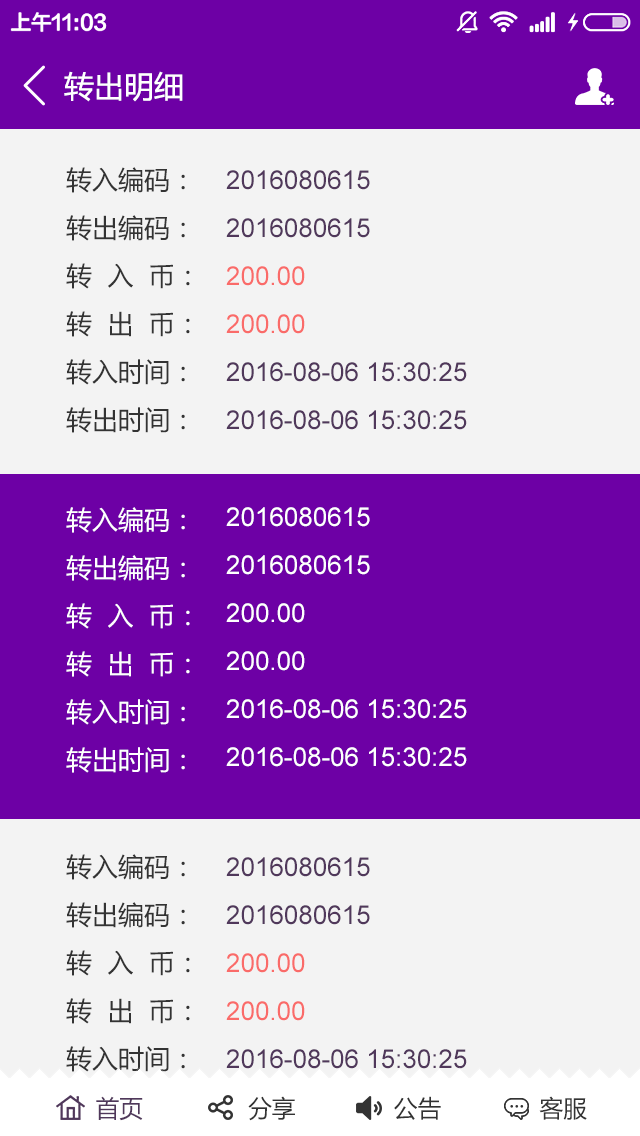
<style>
.page{position:relative;width:640px;height:1136px;background:#f3f3f3}
.page>*{position:absolute;margin:0}
.t1{font:30px "MicrosoftYaHei";color:#ffffff}
.t2{font:26px/48px "MicrosoftYaHei";color:#333333}
.t3{font:26px/48px "ArialMT";color:#50385b}
.t4{font:26px/48px "ArialMT";color:#fa6b69}
.t5{font:26px/48px "MicrosoftYaHei";color:#ffffff}
.t6{font:26px/48px "ArialMT";color:#ffffff}
.t7{font:24px "MicrosoftYaHei";color:#333333}
.t8{font:24px "MicrosoftYaHei";color:#50385b}
</style>
<div class="page">
<p class="t1" style="left:64px;top:71px;width:119px;height:31px">转出明细</p>
<p class="t2" style="left:66px;top:167px;width:124px;height:266px">转入编码：<br>转出编码：<br>转  入  币：<br>转  出  币：<br>转入时间：<br>转出时间：</p>
<p class="t3" style="left:226px;top:170px;width:241px;height:260px">2016080615<br>2016080615<br><span class="t4">200.00<br>200.00<br></span>2016-08-06 15:30:25<br>2016-08-06 15:30:25</p>
<p class="t5" style="left:66px;top:507px;width:124px;height:266px">转入编码：<br>转出编码：<br>转  入  币：<br>转  出  币：<br>转入时间：<br>转出时间：</p>
<p class="t6" style="left:226px;top:507px;width:241px;height:260px">2016080615<br>2016080615<br>200.00<br>200.00<br>2016-08-06 15:30:25<br>2016-08-06 15:30:25</p>
<p class="t2" style="left:66px;top:854px;width:124px;height:266px">转入编码：<br>转出编码：<br>转  入  币：<br>转  出  币：<br>转入时间：<br>转出时间：</p>
<p class="t3" style="left:226px;top:857px;width:241px;height:260px">2016080615<br>2016080615<br><span class="t4">200.00<br>200.00<br></span>2016-08-06 15:30:25<br>2016-08-06 15:30:25</p>
<p class="t7" style="left:96px;top:1096px;width:491px;height:25px"><span class="t8">首页</span>               分享              公告              客服</p>
</div>
